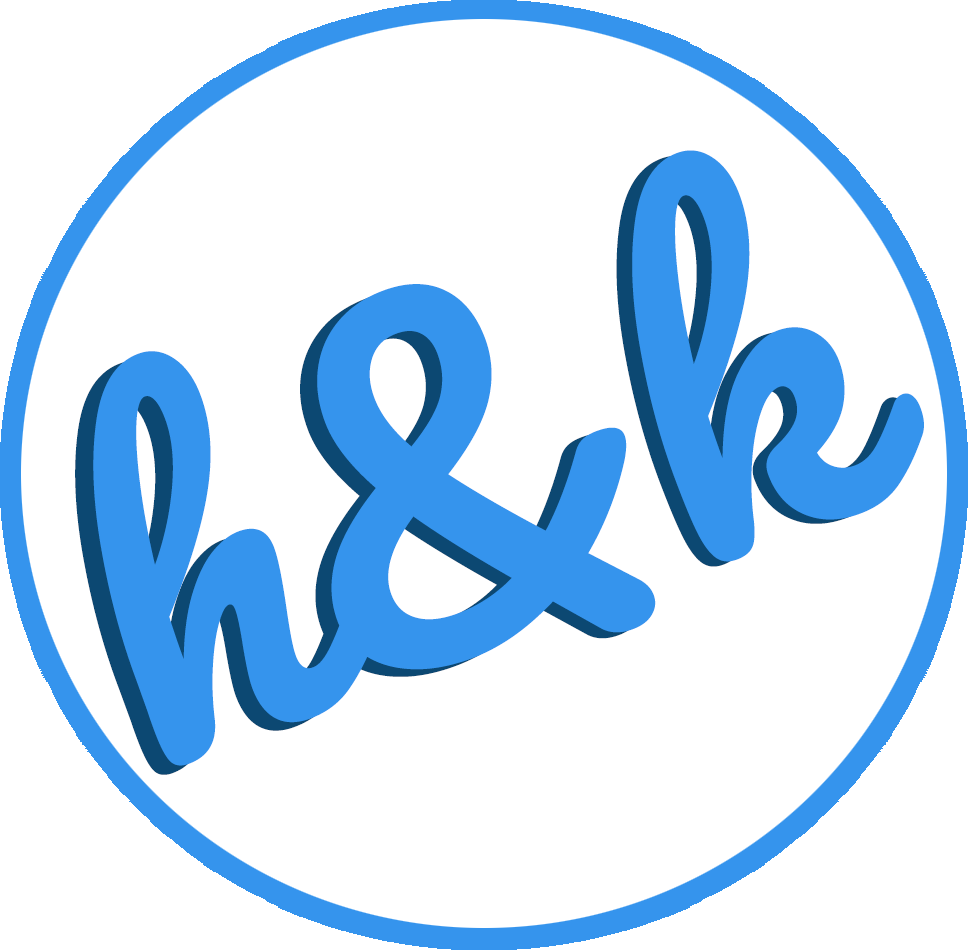
<style>
.page{position:relative;width:968px;height:950px;background:#ffffff}
.page>*{position:absolute;margin:0}
.t1{font:425px "Pacifico-Regular";color:#3594ed}
.t2{font:424.9px "Pacifico-Regular";color:#3594ed}
</style>
<div class="page">
<p class="t1" style="left:93px;top:150px;width:831px;height:616px;rotate:-20deg">h&amp;k</p>
<p class="t2" style="left:75px;top:156px;width:836px;height:619px;rotate:-21deg">h&amp;k</p>
</div>
